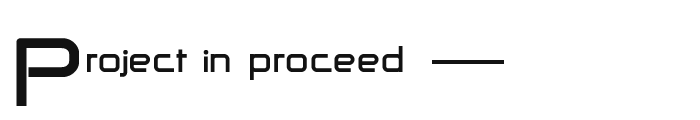
<style>
.page{position:relative;width:700px;height:120px;background:#ffffff}
.page>*{position:absolute;margin:0}
.t1{font:120px "-@-D-RCW2550v.2.00-";color:#121212}
.t2{font:48px "-@-D-RCW2550v.2.00-";color:#121212}
</style>
<div class="page">
<p class="t1" style="left:16px;top:38px;width:63px;height:68px">P</p>
<p class="t2" style="left:87px;top:46px;width:316px;height:34px">roject in proceed</p>
</div>
